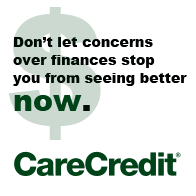
<style>
.page{position:relative;width:196px;height:196px;background:#ffffff}
.page>*{position:absolute;margin:0}
.t1{font:150.9px "Arial-Black";color:#ccd9d1}
.t2{font:14px/18px "Arial-Black";color:#000201}
.t3{font:30px/28px "Arial-Black";color:#004319}
.t4{font:30px/28px "Arial-Black";color:#000201}
</style>
<div class="page">
<p class="t1" style="left:8px;top:7px;width:93px;height:133px">$</p>
<p class="t2" style="left:13px;top:37px;width:174px;height:74px">Don’t let concerns over finances stop <br>you from seeing better <span class="t3">now</span><span class="t4">.</span></p>
</div>
